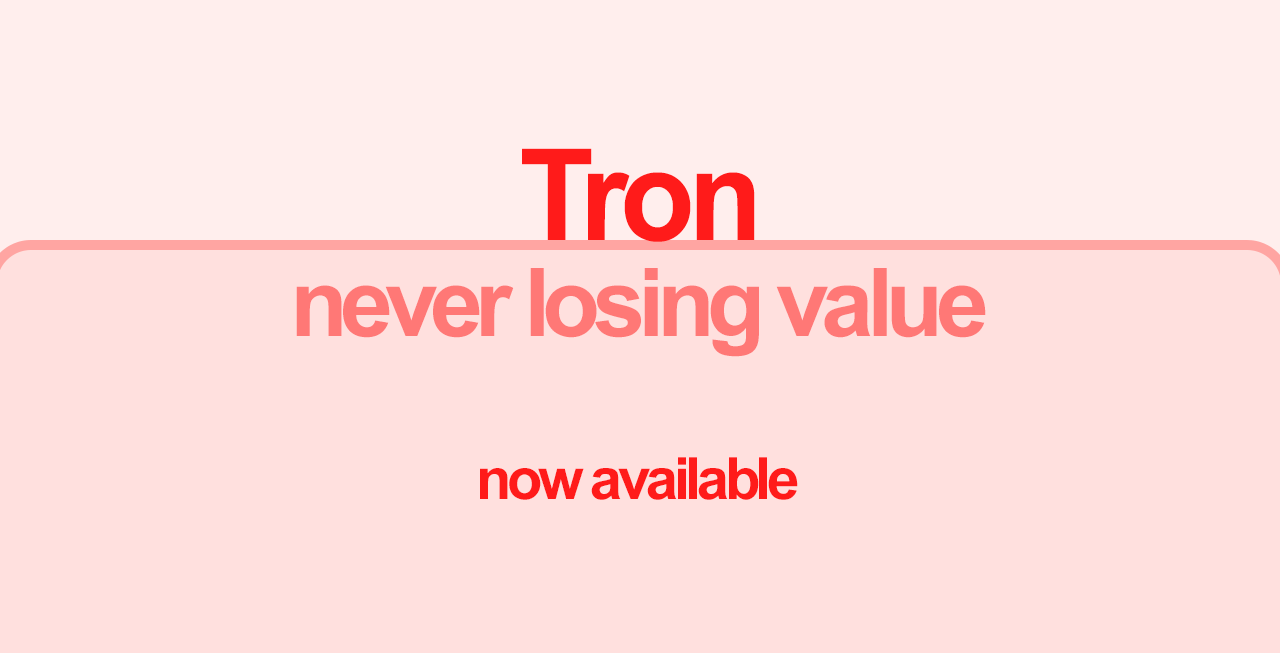
<style>
.page{position:relative;width:1280px;height:653px;background:#ffe0de}
.page>*{position:absolute;margin:0}
.t1{font:127.5px "Arial-BoldMT";letter-spacing:-0.06em;color:#ff1b1a;scale:0.96 1}
.t2{font:94.9px "Arial-BoldMT";letter-spacing:-0.08em;color:#ff7876}
.t3{font:58.3px "Arial-BoldMT";letter-spacing:-0.08em;color:#ff1b1a}
</style>
<div class="page">
<p class="t1" style="left:522px;top:148px;width:233px;height:94px">Tron</p>
<p class="t2" style="left:296px;top:268px;width:690px;height:89px">never losing value</p>
<p class="t3" style="left:480px;top:457px;width:318px;height:43px">now available</p>
</div>
